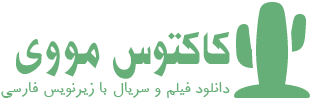
<style>
.page{position:relative;width:311px;height:100px;background:#ffffff}
.page>*{position:absolute;margin:0}
.t1{font:60px "BKourosh";color:#67af78}
.t2{font:24px "ASade";color:#67af78}
</style>
<div class="page">
<p class="t1" style="left:16px;top:32px;width:214px;height:47px">کاکتوس مووی</p>
<p class="t2" style="left:1px;top:82px;width:229px;height:16px">دانلود فیلم و سریال با زیرنویس فارسی</p>
</div>
